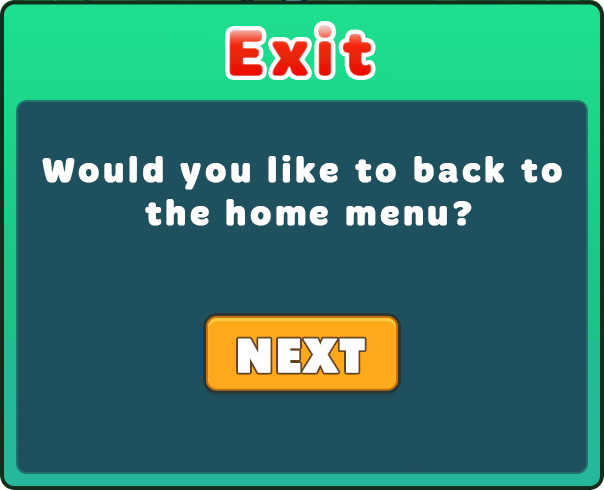
<style>
.page{position:relative;width:604px;height:490px;background:#1f505e}
.page>*{position:absolute;margin:0}
.t1{font:66.2px "SVN-MergeBold";letter-spacing:0.1em;font-weight:bold}
.t2{font:36px "SVN-MergeBold";letter-spacing:0.1em;color:#ffffff;font-weight:bold}
</style>
<div class="page">
<p class="t1" style="left:229px;top:25px;width:143px;height:51px">Exit</p>
<p class="t2" style="left:42px;top:155px;width:520px;height:71px;text-align:center">Would you like to back to<br> the home menu?</p>
</div>
